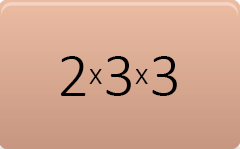
<style>
.page{position:relative;width:240px;height:149px}
.page>*{position:absolute;margin:0}
.t1{font:64px "Calibri-Light";color:#000000}
.t2{font:32px "Calibri-Light";color:#000000}
</style>
<div class="page">
<p class="t1" style="left:61px;top:56px;width:116px;height:40px">2<span class="t2">x</span>3<span class="t2">x</span>3</p>
</div>
